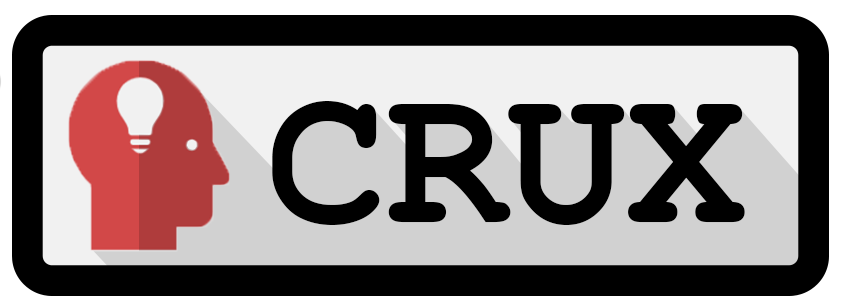
<style>
.page{position:relative;width:847px;height:307px;background:#000000}
.page>*{position:absolute;margin:0}
.t1{font:200px "CourierNewPS-BoldMT";color:#000000}
</style>
<div class="page">
<p class="t1" style="left:272px;top:101px;width:473px;height:124px">CRUX</p>
</div>
